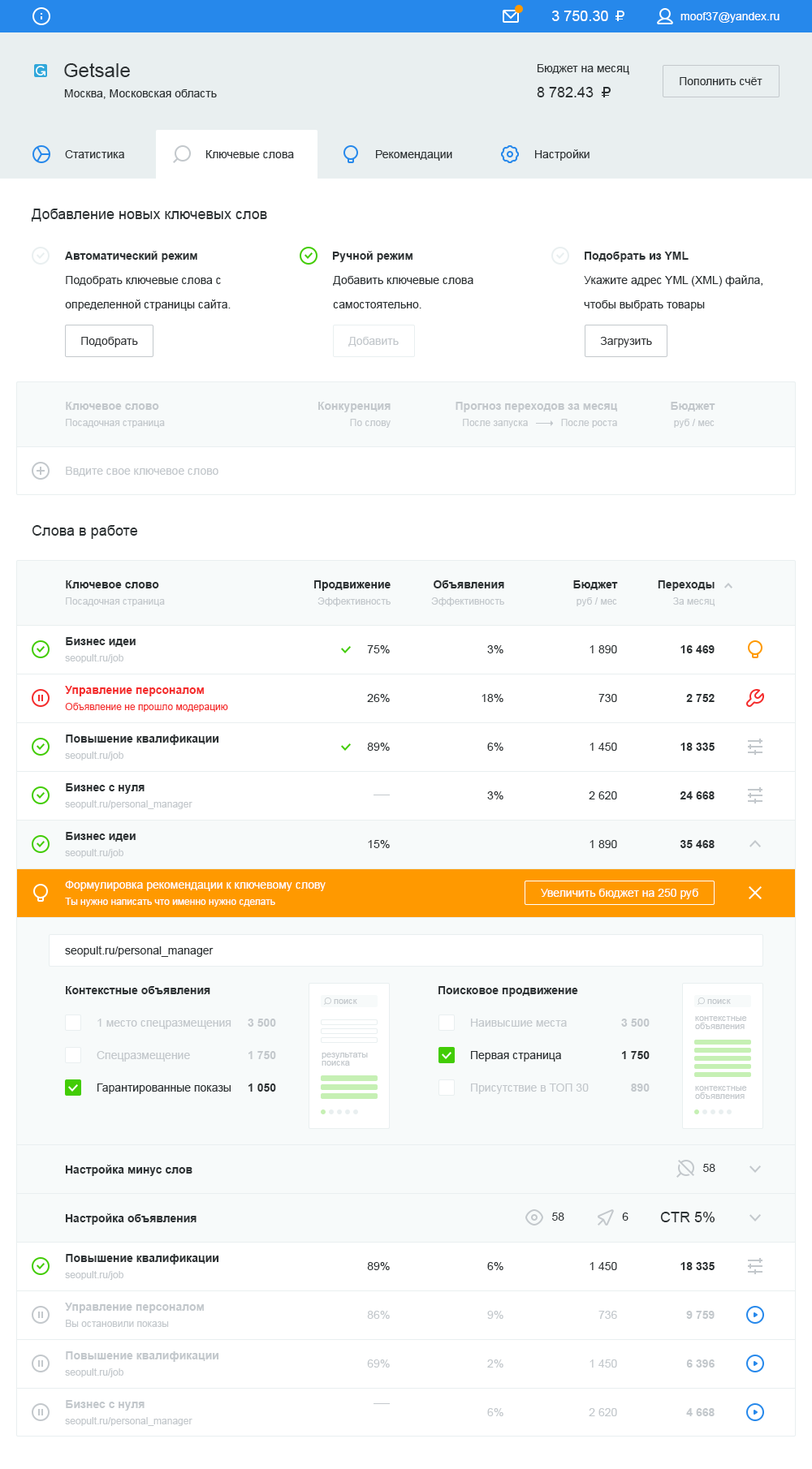
<style>
.page{position:relative;width:812px;height:1469px;background:#ffffff}
.page>*{position:absolute;margin:0}
.t1{font:14.6px "ArialMT";color:#ffffff}
.t2{font:11.4px "ArialMT";color:#ffffff}
.t3{font:19.5px "ArialMT";color:#2c3133}
.t4{font:11.4px "ArialMT";color:#2c3133}
.t5{font:14.6px "ArialMT";color:#2c3133}
.t6{font:11.4px "Arial-BoldMT";color:#2c3133}
.t7{font:11.4px/24.3px "ArialMT";color:#2c3133}
.t8{font:11.4px "ArialMT";color:#313436}
.t9{font:11.4px "ArialMT";color:#c3c8cc}
.t10{font:11.4px "Arial-BoldMT";color:#c3c8cc}
.t11{font:9.7px "ArialMT";color:#c3c8cc}
.t12{font:11.4px "Arial-BoldMT";color:#f42c2c}
.t13{font:9.7px "ArialMT";color:#f42c2c}
.t14{font:9.7px "ArialMT";color:#ffffff}
.t15{font:8.9px "ArialMT";color:#c3c8cc}
.t16{font:11.4px/32.5px "ArialMT";color:#c3c8cc}
.t17{font:11.4px/32.5px "ArialMT";color:#2c3133}
.t18{font:11.4px/32.5px "Arial-BoldMT";color:#c3c8cc}
.t19{font:11.4px/32.5px "Arial-BoldMT";color:#2c3133}
.t20{font:8.9px/8.1px "ArialMT";color:#c3c8cc}
</style>
<div class="page">
<p class="t1" style="left:552px;top:11px;width:56px;height:10px">3 750.30</p>
<p class="t2" style="left:680px;top:12px;width:99px;height:11px">moof37@yandex.ru</p>
<p class="t3" style="left:64px;top:62px;width:66px;height:15px">Getsale</p>
<p class="t4" style="left:537px;top:64px;width:92px;height:11px">Бюджет на месяц</p>
<p class="t4" style="left:679px;top:77px;width:83px;height:8px">Пополнить счёт</p>
<p class="t4" style="left:64px;top:89px;width:153px;height:10px">Москва, Московская область</p>
<p class="t5" style="left:537px;top:87px;width:56px;height:10px">8 782.43</p>
<p class="t4" style="left:535px;top:149px;width:54px;height:12px">Настройки</p>
<p class="t4" style="left:65px;top:150px;width:59px;height:8px">Статистика</p>
<p class="t4" style="left:206px;top:150px;width:88px;height:8px">Ключевые слова</p>
<p class="t4" style="left:376px;top:150px;width:76px;height:11px">Рекомендации</p>
<p class="t5" style="left:31px;top:209px;width:236px;height:13px">Добавление новых ключевых слов</p>
<p class="t6" style="left:65px;top:251px;width:132px;height:11px">Автоматический режим</p>
<p class="t6" style="left:332px;top:251px;width:80px;height:11px">Ручной режим</p>
<p class="t6" style="left:584px;top:252px;width:104px;height:10px">Подобрать из YML</p>
<p class="t7" style="left:65px;top:276px;width:166px;height:35px">Подобрать ключевые слова с <br>определенной страницы сайта.</p>
<p class="t7" style="left:333px;top:276px;width:140px;height:32px">Добавить ключевые слова<br>самостоятельно.</p>
<p class="t7" style="left:584px;top:275px;width:178px;height:36px">Укажите адрес YML (XML) файла, <br>чтобы выбрать товары</p>
<p class="t8" style="left:81px;top:337px;width:57px;height:10px">Подобрать</p>
<p class="t9" style="left:348px;top:337px;width:51px;height:10px">Добавить</p>
<p class="t8" style="left:600px;top:337px;width:52px;height:10px">Загрузить</p>
<p class="t10" style="left:66px;top:402px;width:93px;height:8px">Ключевое слово</p>
<p class="t10" style="left:318px;top:402px;width:72px;height:10px">Конкуренция</p>
<p class="t10" style="left:455px;top:402px;width:163px;height:10px">Прогноз переходов за месяц</p>
<p class="t10" style="left:670px;top:402px;width:45px;height:10px">Бюджет</p>
<p class="t11" style="left:66px;top:419px;width:99px;height:9px">Посадочная страница</p>
<p class="t11" style="left:350px;top:419px;width:40px;height:9px">По слову</p>
<p class="t11" style="left:463px;top:419px;width:65px;height:9px">После запуска</p>
<p class="t11" style="left:561px;top:419px;width:56px;height:9px">После роста</p>
<p class="t11" style="left:674px;top:419px;width:40px;height:9px">руб / мес</p>
<p class="t9" style="left:66px;top:467px;width:152px;height:9px">Ввдите свое ключевое слово</p>
<p class="t5" style="left:32px;top:525px;width:106px;height:14px">Слова в работе</p>
<p class="t6" style="left:66px;top:580px;width:93px;height:8px">Ключевое слово</p>
<p class="t6" style="left:314px;top:580px;width:76px;height:11px">Продвижение</p>
<p class="t6" style="left:433px;top:580px;width:71px;height:8px">Объявления</p>
<p class="t6" style="left:573px;top:580px;width:45px;height:10px">Бюджет</p>
<p class="t6" style="left:657px;top:580px;width:57px;height:11px">Переходы</p>
<p class="t11" style="left:66px;top:597px;width:99px;height:9px">Посадочная страница</p>
<p class="t11" style="left:317px;top:597px;width:73px;height:9px">Эффективность</p>
<p class="t11" style="left:431px;top:597px;width:73px;height:9px">Эффективность</p>
<p class="t11" style="left:576px;top:597px;width:41px;height:9px">руб / мес</p>
<p class="t11" style="left:673px;top:597px;width:42px;height:9px">За месяц</p>
<p class="t6" style="left:66px;top:637px;width:70px;height:10px">Бизнес идеи</p>
<p class="t4" style="left:367px;top:645px;width:23px;height:8px">75%</p>
<p class="t4" style="left:487px;top:645px;width:16px;height:8px">3%</p>
<p class="t4" style="left:589px;top:645px;width:28px;height:8px">1 890</p>
<p class="t6" style="left:680px;top:645px;width:34px;height:8px">16 469</p>
<p class="t11" style="left:65px;top:654px;width:58px;height:9px">seopult.ru/job</p>
<p class="t12" style="left:65px;top:686px;width:139px;height:10px">Управление персоналом</p>
<p class="t4" style="left:367px;top:694px;width:23px;height:8px">26%</p>
<p class="t4" style="left:481px;top:694px;width:22px;height:8px">18%</p>
<p class="t4" style="left:598px;top:694px;width:19px;height:8px">730</p>
<p class="t6" style="left:686px;top:694px;width:28px;height:8px">2 752</p>
<p class="t13" style="left:65px;top:703px;width:163px;height:9px">Объявление не прошло модерацию</p>
<p class="t6" style="left:66px;top:735px;width:153px;height:10px">Повышение квалификации</p>
<p class="t4" style="left:367px;top:743px;width:23px;height:8px">89%</p>
<p class="t4" style="left:487px;top:743px;width:16px;height:8px">6%</p>
<p class="t4" style="left:589px;top:743px;width:28px;height:8px">1 450</p>
<p class="t6" style="left:680px;top:743px;width:34px;height:8px">18 335</p>
<p class="t11" style="left:65px;top:752px;width:58px;height:9px">seopult.ru/job</p>
<p class="t6" style="left:66px;top:783px;width:78px;height:11px">Бизнес с нуля</p>
<p class="t4" style="left:487px;top:791px;width:16px;height:8px">3%</p>
<p class="t4" style="left:588px;top:791px;width:29px;height:8px">2 620</p>
<p class="t6" style="left:679px;top:791px;width:35px;height:8px">24 668</p>
<p class="t11" style="left:65px;top:800px;width:127px;height:9px">seopult.ru/personal_manager</p>
<p class="t6" style="left:66px;top:832px;width:70px;height:10px">Бизнес идеи</p>
<p class="t4" style="left:368px;top:840px;width:22px;height:8px">15%</p>
<p class="t4" style="left:589px;top:840px;width:28px;height:8px">1 890</p>
<p class="t6" style="left:680px;top:840px;width:34px;height:8px">35 468</p>
<p class="t11" style="left:65px;top:849px;width:58px;height:9px">seopult.ru/job</p>
<p class="t2" style="left:65px;top:881px;width:260px;height:10px">Формулировка рекомендации к ключевому слову</p>
<p class="t2" style="left:541px;top:889px;width:157px;height:10px">Увеличить бюджет на 250 руб</p>
<p class="t14" style="left:65px;top:898px;width:210px;height:9px">Ты нужно написать что именно нужно сделать</p>
<p class="t4" style="left:65px;top:946px;width:148px;height:11px">seopult.ru/personal_manager</p>
<p class="t6" style="left:66px;top:986px;width:144px;height:8px">Контекстные объявления</p>
<p class="t6" style="left:438px;top:986px;width:140px;height:11px">Поисковое продвижение</p>
<p class="t15" style="left:334px;top:999px;width:23px;height:5px">поиск</p>
<p class="t15" style="left:707px;top:999px;width:23px;height:5px">поиск</p>
<p class="t16" style="left:97px;top:1019px;width:134px;height:75px">1 место спецразмещения<br>Спецразмещение<br><span class="t17">Гарантированные показы</span></p>
<p class="t18" style="left:248px;top:1019px;width:28px;height:73px;text-align:right">3 500<br>1 750<br><span class="t19">1 050</span></p>
<p class="t16" style="left:471px;top:1019px;width:117px;height:75px">Наивысшие места<br><span class="t17">Первая страница<br></span>Присутствие в ТОП 30</p>
<p class="t18" style="left:621px;top:1019px;width:28px;height:73px;text-align:right">3 500<br><span class="t19">1 750<br></span>890</p>
<p class="t20" style="left:695px;top:1016px;width:52px;height:13px">контекстные<br>объявления</p>
<p class="t20" style="left:321px;top:1053px;width:47px;height:13px">результаты <br>поиска</p>
<p class="t20" style="left:695px;top:1086px;width:52px;height:13px">контекстные<br>объявления</p>
<p class="t6" style="left:65px;top:1165px;width:127px;height:11px">Настройка минус слов</p>
<p class="t4" style="left:703px;top:1164px;width:12px;height:8px">58</p>
<p class="t6" style="left:65px;top:1213px;width:131px;height:12px">Настройка объявления</p>
<p class="t4" style="left:552px;top:1213px;width:12px;height:8px">58</p>
<p class="t4" style="left:622px;top:1213px;width:6px;height:8px">6</p>
<p class="t5" style="left:660px;top:1212px;width:55px;height:10px">CTR 5%</p>
<p class="t6" style="left:66px;top:1254px;width:153px;height:11px">Повышение квалификации</p>
<p class="t4" style="left:367px;top:1262px;width:23px;height:8px">89%</p>
<p class="t4" style="left:487px;top:1262px;width:16px;height:8px">6%</p>
<p class="t4" style="left:589px;top:1262px;width:28px;height:8px">1 450</p>
<p class="t6" style="left:680px;top:1262px;width:34px;height:8px">18 335</p>
<p class="t11" style="left:65px;top:1271px;width:58px;height:9px">seopult.ru/job</p>
<p class="t10" style="left:65px;top:1303px;width:139px;height:10px">Управление персоналом</p>
<p class="t9" style="left:367px;top:1311px;width:23px;height:8px">86%</p>
<p class="t9" style="left:487px;top:1311px;width:16px;height:8px">9%</p>
<p class="t9" style="left:598px;top:1311px;width:19px;height:8px">736</p>
<p class="t10" style="left:686px;top:1311px;width:28px;height:8px">9 759</p>
<p class="t11" style="left:66px;top:1320px;width:103px;height:7px">Вы остановили показы</p>
<p class="t10" style="left:66px;top:1351px;width:153px;height:11px">Повышение квалификации</p>
<p class="t9" style="left:367px;top:1360px;width:23px;height:8px">69%</p>
<p class="t9" style="left:487px;top:1360px;width:16px;height:8px">2%</p>
<p class="t9" style="left:589px;top:1360px;width:28px;height:8px">1 450</p>
<p class="t10" style="left:686px;top:1360px;width:28px;height:8px">6 396</p>
<p class="t11" style="left:65px;top:1368px;width:58px;height:9px">seopult.ru/job</p>
<p class="t10" style="left:66px;top:1400px;width:78px;height:11px">Бизнес с нуля</p>
<p class="t9" style="left:487px;top:1408px;width:16px;height:8px">6%</p>
<p class="t9" style="left:588px;top:1408px;width:29px;height:8px">2 620</p>
<p class="t10" style="left:686px;top:1408px;width:28px;height:8px">4 668</p>
<p class="t11" style="left:65px;top:1417px;width:127px;height:9px">seopult.ru/personal_manager</p>
</div>
